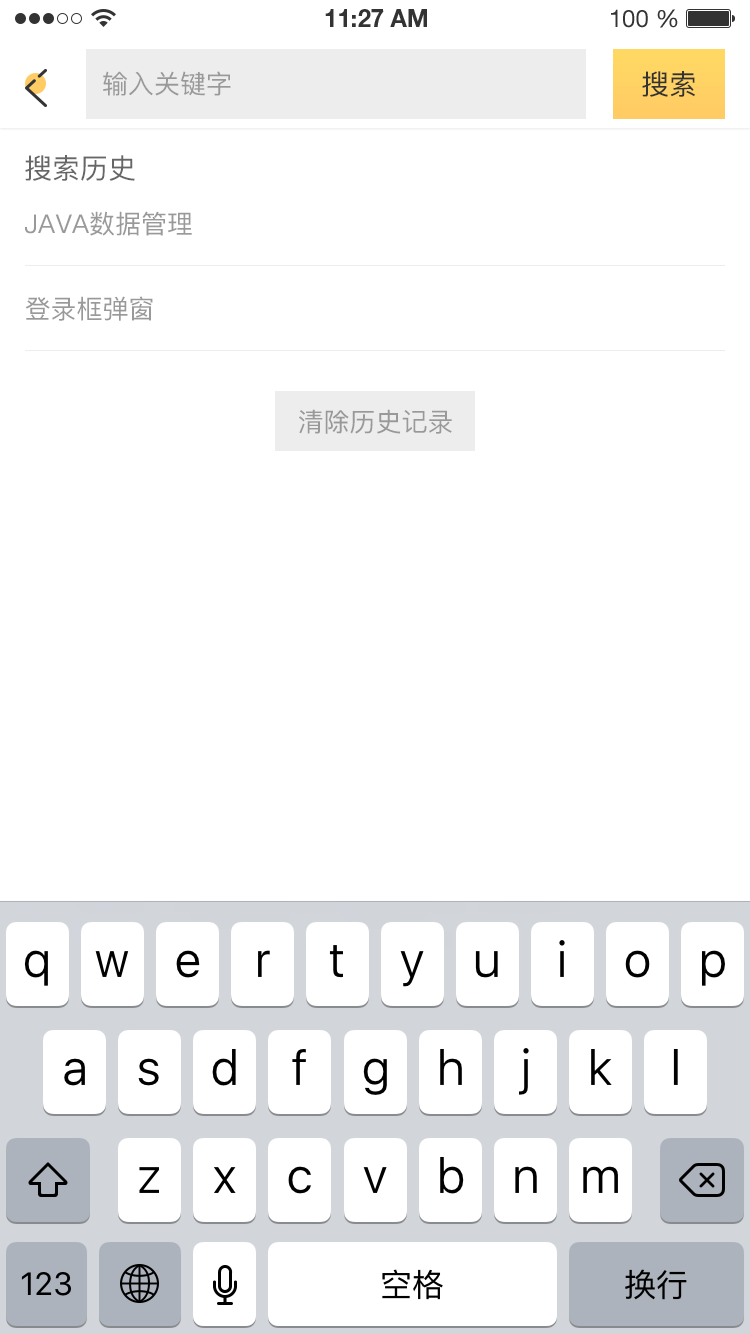
<style>
.page{position:relative;width:750px;height:1334px;background:#ffffff}
.page>*{position:absolute;margin:0}
.t1{font:26px "PingFang-SC-Medium";color:#999999;text-transform:uppercase}
.t2{font:28px "PingFang-SC-Medium";color:#333333;text-transform:uppercase}
.t3{font:28px "PingFang-SC-Medium";color:#666666;text-transform:uppercase}
</style>
<div class="page">
<p class="t1" style="left:103px;top:71px;width:128px;height:25px">输入关键字</p>
<p class="t2" style="left:642px;top:71px;width:53px;height:26px">搜索</p>
<p class="t3" style="left:25px;top:155px;width:110px;height:26px">搜索历史</p>
<p class="t1" style="left:25px;top:211px;width:167px;height:25px">java数据管理</p>
<p class="t1" style="left:25px;top:296px;width:128px;height:25px">登录框弹窗</p>
<p class="t1" style="left:299px;top:409px;width:153px;height:25px">清除历史记录</p>
</div>
